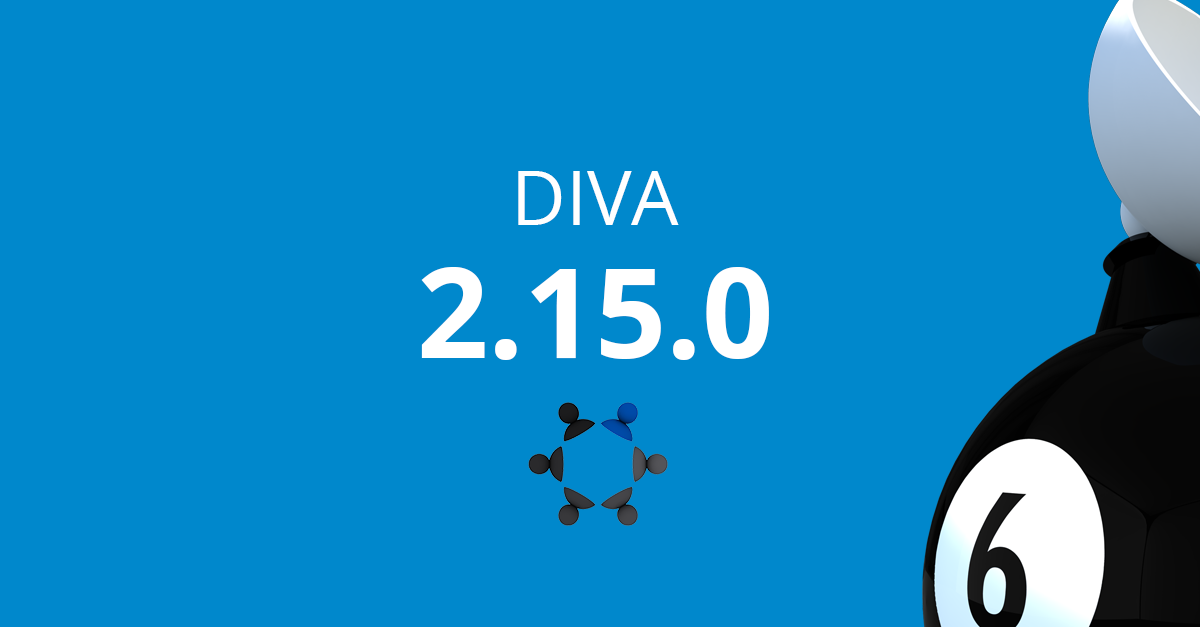
<style>
.page{position:relative;width:1200px;height:627px;background:#0088cc}
.page>*{position:absolute;margin:0}
.t1{font:75px "OpenSans";color:#ffffff}
.t2{font:125px "OpenSans-Bold";color:#ffffff}
</style>
<div class="page">
<p class="t1" style="left:518px;top:171px;width:161px;height:54px">DIVA</p>
<p class="t2" style="left:421px;top:267px;width:348px;height:93px">2.15.0</p>
</div>
